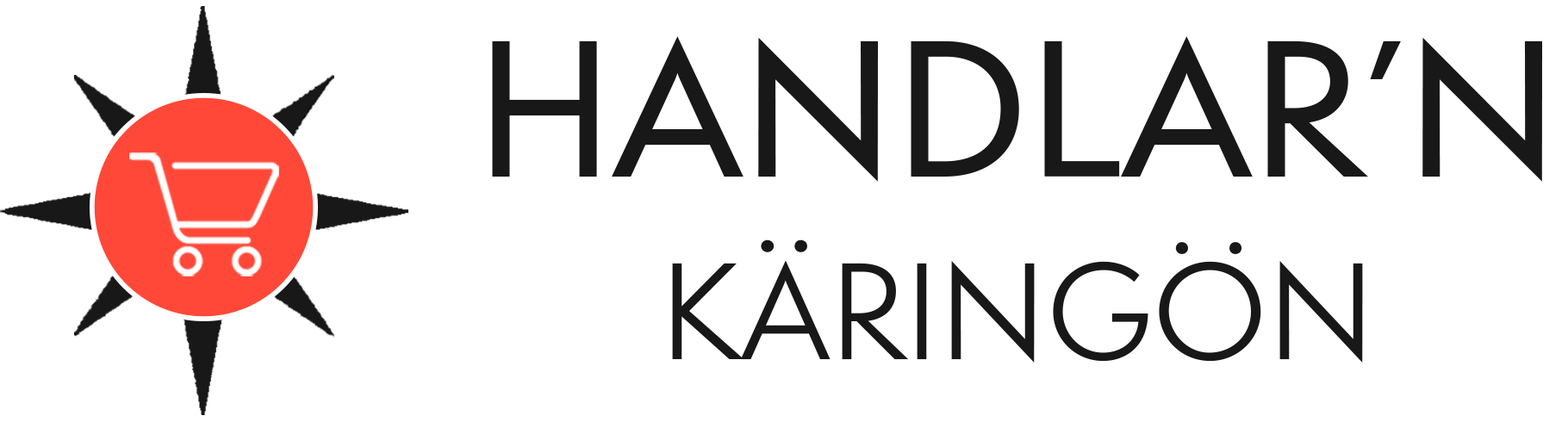
<style>
.page{position:relative;width:1568px;height:422px;background:#ffffff}
.page>*{position:absolute;margin:0}
.t1{font:178.8px "SemplicitaPro-Medium";color:#181818}
.t2{font:126.4px "SemplicitaPro";color:#181818}
</style>
<div class="page">
<p class="t1" style="left:492px;top:36px;width:1050px;height:146px">HANDLAR’N</p>
<p class="t2" style="left:672px;top:240px;width:691px;height:123px">KÄRINGÖN</p>
</div>
